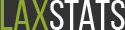
<style>
.page{position:relative;width:125px;height:30px;background:#333333}
.page>*{position:absolute;margin:0}
.t1{font:41.5px "BebasNeueRegular";color:#ffffff}
.t2{font:41.5px "BebasNeueRegular";color:#90ab29}
</style>
<div class="page">
<p class="t1" style="left:0px;top:0px;width:125px;height:30px"><span class="t2">LAX</span>STATS</p>
</div>
